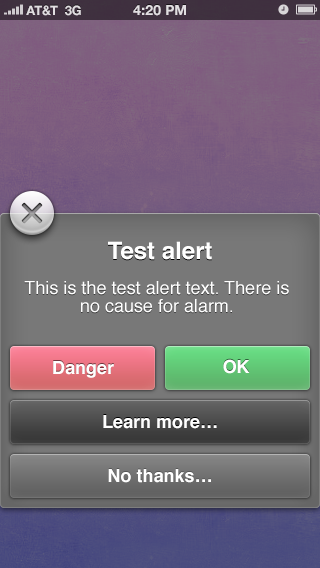
<style>
.page{position:relative;width:320px;height:568px}
.page>*{position:absolute;margin:0}
.t1{font:13px "HelveticaNeue-Bold";color:#e1dee1;text-transform:uppercase}
.t2{font:13px "HelveticaNeue-Bold";color:#e1dfe1;text-transform:uppercase}
.t3{font:14px "HelveticaNeue-Bold";color:#e1dfe1;text-transform:uppercase}
.t4{font:24px "Helvetica-Bold";color:#ffffff}
.t5{font:18px/18px "Helvetica";color:#ffffff}
.t6{font:18px "Helvetica-Bold";color:#ffffff}
</style>
<div class="page">
<p class="t1" style="left:26px;top:5px;width:32px;height:11px">AT&amp;T</p>
<p class="t2" style="left:65px;top:5px;width:16px;height:11px">3G</p>
<p class="t3" style="left:133px;top:5px;width:53px;height:11px">4:20 pM</p>
<p class="t4" style="left:108px;top:241px;width:104px;height:19px">Test alert</p>
<p class="t5" style="left:24px;top:281px;width:265px;height:32px;text-align:center">This is the test alert text. There is no cause for alarm.</p>
<p class="t6" style="left:53px;top:361px;width:61px;height:17px">Danger</p>
<p class="t6" style="left:223px;top:359px;width:27px;height:15px">OK</p>
<p class="t6" style="left:103px;top:415px;width:114px;height:14px">Learn more…</p>
<p class="t6" style="left:108px;top:469px;width:103px;height:14px">No thanks…</p>
</div>
